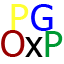
<style>
.page{position:relative;width:64px;height:64px;background:#ffffff}
.page>*{position:absolute;margin:0}
.t1{font:36px "Tahoma";color:#ffff33}
.t2{font:36px "Tahoma";color:#0000ff}
.t3{font:36px "Tahoma";color:#990000}
.t4{font:36px "Tahoma";color:#000000}
.t5{font:36px "Tahoma";color:#009933}
</style>
<div class="page">
<p class="t1" style="left:11px;top:4px;width:18px;height:26px">P</p>
<p class="t2" style="left:31px;top:4px;width:22px;height:27px">G</p>
<p class="t3" style="left:1px;top:30px;width:24px;height:27px">O</p>
<p class="t4" style="left:25px;top:37px;width:18px;height:20px">x</p>
<p class="t5" style="left:45px;top:31px;width:18px;height:26px">P</p>
</div>
